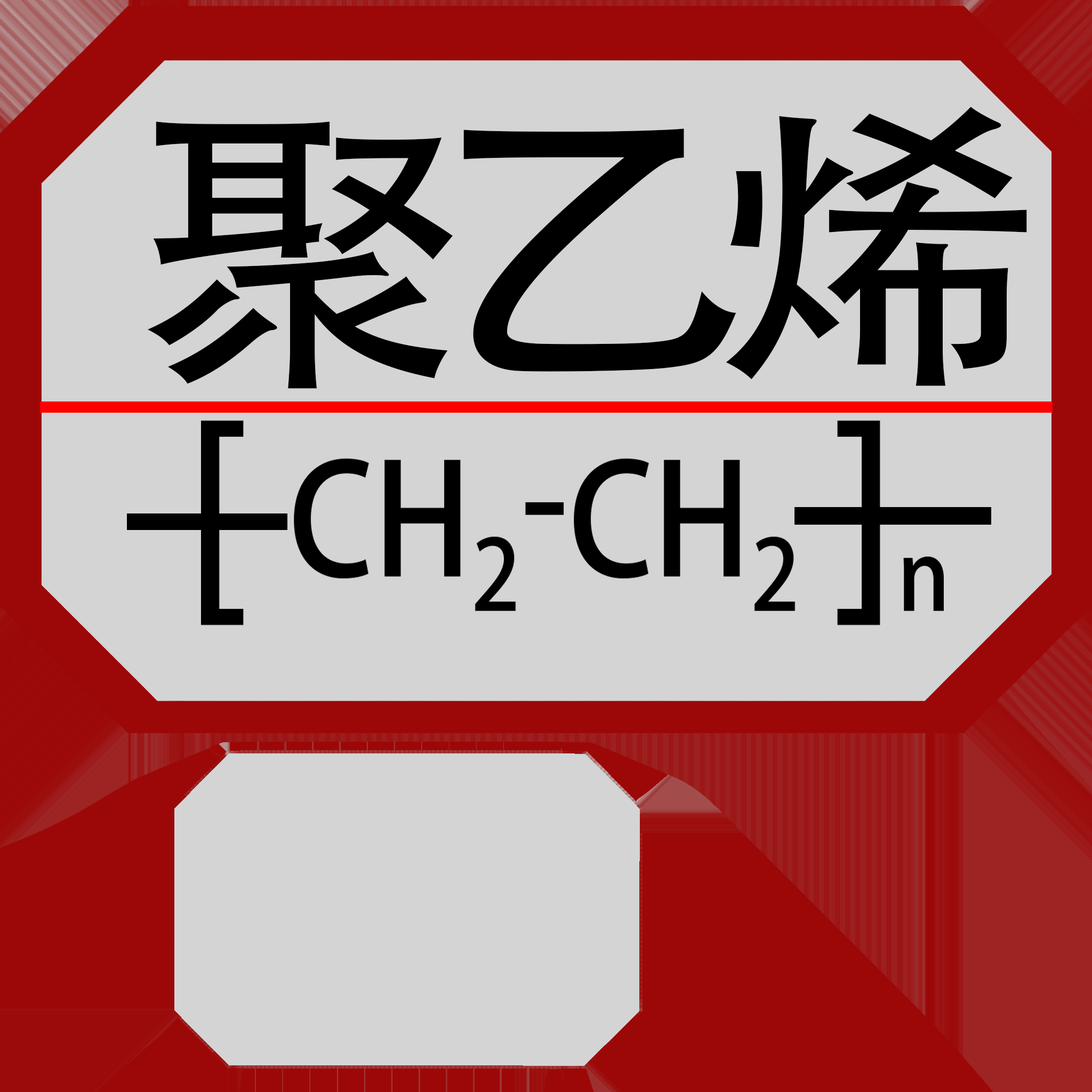
<style>
.page{position:relative;width:1092px;height:1092px;background:#d4d4d4}
.page>*{position:absolute;margin:0}
.t1{font:307.6px "AdobeHeitiStd-Regular";letter-spacing:-0.2em;color:#000000;scale:1.1 1}
</style>
<div class="page">
<p class="t1" style="left:147px;top:107px;width:880px;height:282px">聚  乙  烯</p>
</div>
